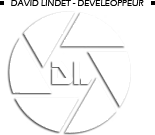
<style>
.page{position:relative;width:155px;height:135px;background:#ffffff}
.page>*{position:absolute;margin:0}
.t1{font:9px "ErasITC-Medium";color:#000000}
</style>
<div class="page">
<p class="t1" style="left:11px;top:0px;width:133px;height:6px">DAVID LINDET - DEVELEOPPEUR</p>
</div>
